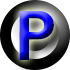
<style>
.page{position:relative;width:70px;height:70px}
.page>*{position:absolute;margin:0}
.t1{font:72px "GillSans-SemiBold"}
</style>
<div class="page">
<p class="t1" style="left:19px;top:11px;width:35px;height:49px">P</p>
</div>
